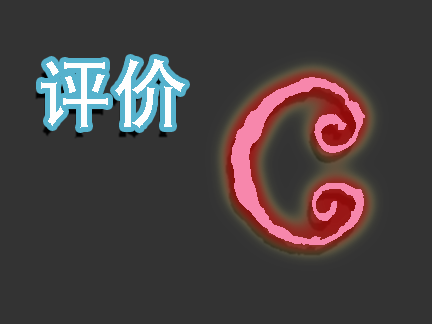
<style>
.page{position:relative;width:432px;height:324px;background:#333333}
.page>*{position:absolute;margin:0}
.t1{font:75px "AdobeHeitiStd-Regular";color:#fefefe}
.t2{font:250px "Gigi-Regular";color:#f787ac}
</style>
<div class="page">
<p class="t1" style="left:41px;top:59px;width:144px;height:69px">评价</p>
<p class="t2" style="left:231px;top:77px;width:134px;height:168px">C</p>
</div>
